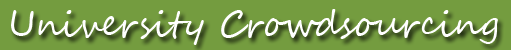
<style>
.page{position:relative;width:511px;height:50px;background:#749c3f}
.page>*{position:absolute;margin:0}
.t1{font:35px "SegoeScript";color:#ffffff}
</style>
<div class="page">
<p class="t1" style="left:11px;top:9px;width:487px;height:36px">University Crowdsourcing</p>
</div>
